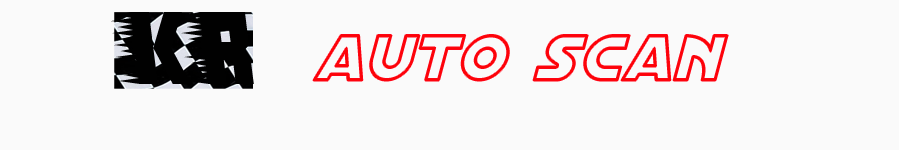
<style>
.page{position:relative;width:899px;height:150px;background:#fafafa}
.page>*{position:absolute;margin:0}
.t1{font:100px "Endeavourforever";color:#010101}
.t2{font:70px "DistantGalaxyOutlineItalic";color:#fe0404}
</style>
<div class="page">
<p class="t1" style="left:111px;top:12px;width:143px;height:72px">KR</p>
<p class="t2" style="left:313px;top:35px;width:415px;height:46px">Auto scan</p>
</div>
